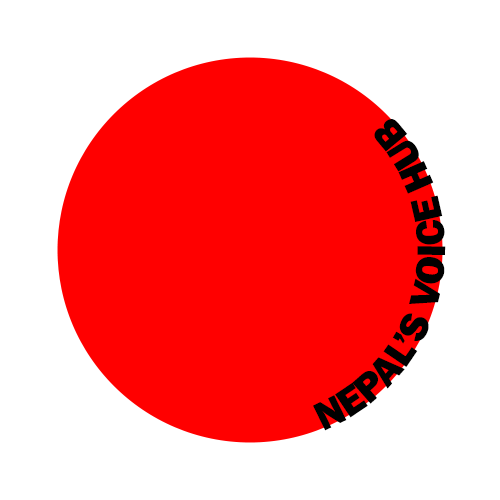
<style>
.page{position:relative;width:500px;height:500px;background:#ffffff}
.page>*{position:absolute;margin:0}
.t1{font:41.5px "FranklinGothic-Heavy";color:#000000}
</style>
<div class="page">
<p class="t1" style="left:313px;top:119px;width:133px;height:312px">NEPAL’S VOICE HUB</p>
</div>
